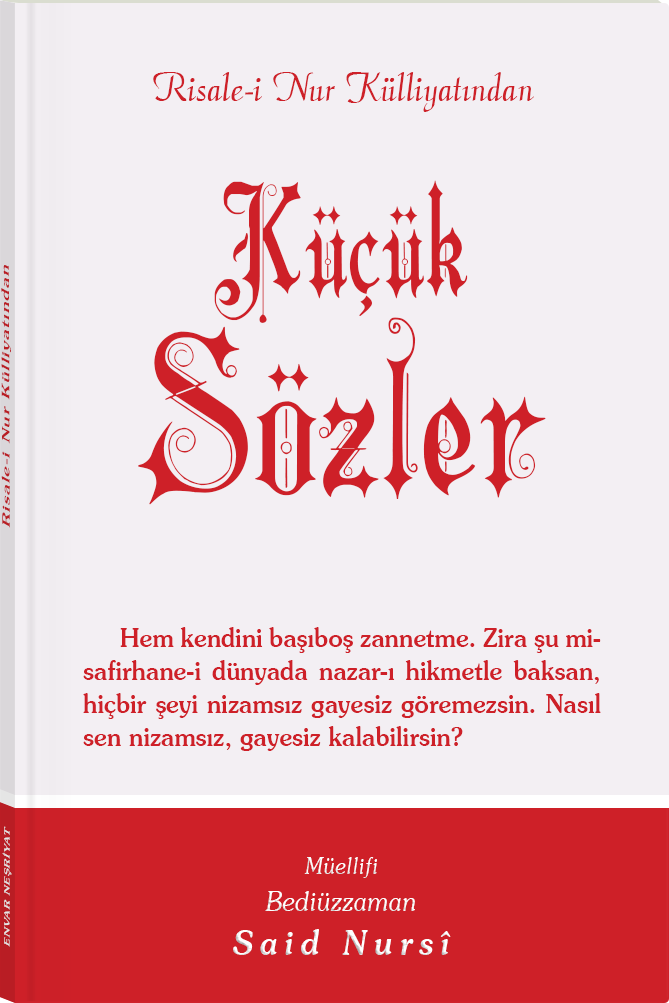
<style>
.page{position:relative;width:669px;height:1003px;background:#f3eff3}
.page>*{position:absolute;margin:0}
.t1{font:45.3px "Barla © 072 Aria ScriptScriptSSi";color:#ce2028;scale:0.94 1}
.t2{font:223.2px/199.1px "Barla © 001 Liva Nur";letter-spacing:-0.001em;color:#ce2028;scale:0.92 1}
.t3{font:150.9px/199.1px "Barla © 001 Liva Nur";letter-spacing:-0.001em;color:#ce2028;scale:0.92 1}
.t4{font:11.4px "Souvenir-Medium";letter-spacing:0.08em;color:#ce2028;scale:1.65 1}
.t5{font:26.3px/33px "Souvenir-Medium";color:#ce2028;scale:0.92 1}
.t6{font:8.3px "Souvenir-Medium";letter-spacing:0.08em;color:#e5e5e5;scale:1.43 1}
.t7{font:27.1px/37.8px "Souvenir-LightItalic";color:#ffffff;scale:0.92 1}
.t8{font:22.8px/39.8px "Souvenir-LightItalic";color:#ffffff;scale:0.92 1}
.t9{font:33.9px/43.8px "Souvenir-MediumItalic";letter-spacing:0.2em;color:#ffffff;scale:0.92 1}
</style>
<div class="page">
<p class="t1" style="left:153px;top:72px;width:381px;height:40px">Risale-i Nur Külliyatından</p>
<p class="t2" style="left:138px;top:180px;width:408px;height:325px;text-align:center"><span class="t3">Küçük<br></span>Sözler</p>
<p class="t4" style="left:1px;top:265px;width:10px;height:263px;rotate:-90deg">Risale-i Nur Külliyatından</p>
<p class="t5" style="left:83px;top:627px;width:518px;height:124px;text-align:justify">Hem kendini başıboş zannetme. Zira şu misafirhane-i dünyada nazar-ı hikmetle baksan, hiçbir şeyi nizamsız gayesiz göremezsin. Nasıl sen nizamsız, gayesiz kalabilirsin?</p>
<p class="t6" style="left:2px;top:826px;width:10px;height:121px;rotate:-90deg">ENVAR NEŞRİYAT</p>
<p class="t7" style="left:233px;top:857px;width:218px;height:98px;text-align:center"><span class="t8">Müellifi<br></span>Bediüzzaman<br><span class="t9">Said Nursî</span></p>
</div>
